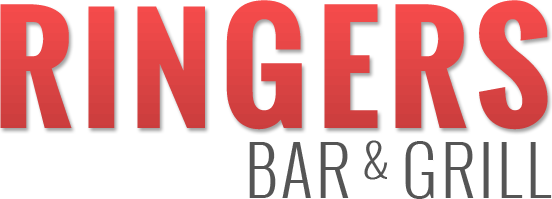
<style>
.page{position:relative;width:552px;height:199px;background:#ffffff}
.page>*{position:absolute;margin:0}
.t1{font:141.4px "Oswald-Bold";letter-spacing:0.06em;color:#e14545}
.t2{font:65.5px "Oswald-Light";letter-spacing:0.06em;color:#555555}
.t3{font:65.5px "Oswald-Light";letter-spacing:-0.06em;color:#555555}
.t4{font:44.6px "Oswald-Light";letter-spacing:-0.06em;color:#555555}
</style>
<div class="page">
<p class="t1" style="left:0px;top:0px;width:548px;height:130px">RINGERS</p>
<p class="t2" style="left:249px;top:140px;width:303px;height:59px">BA<span class="t3">R </span><span class="t4">&amp;</span> GRILL</p>
</div>
